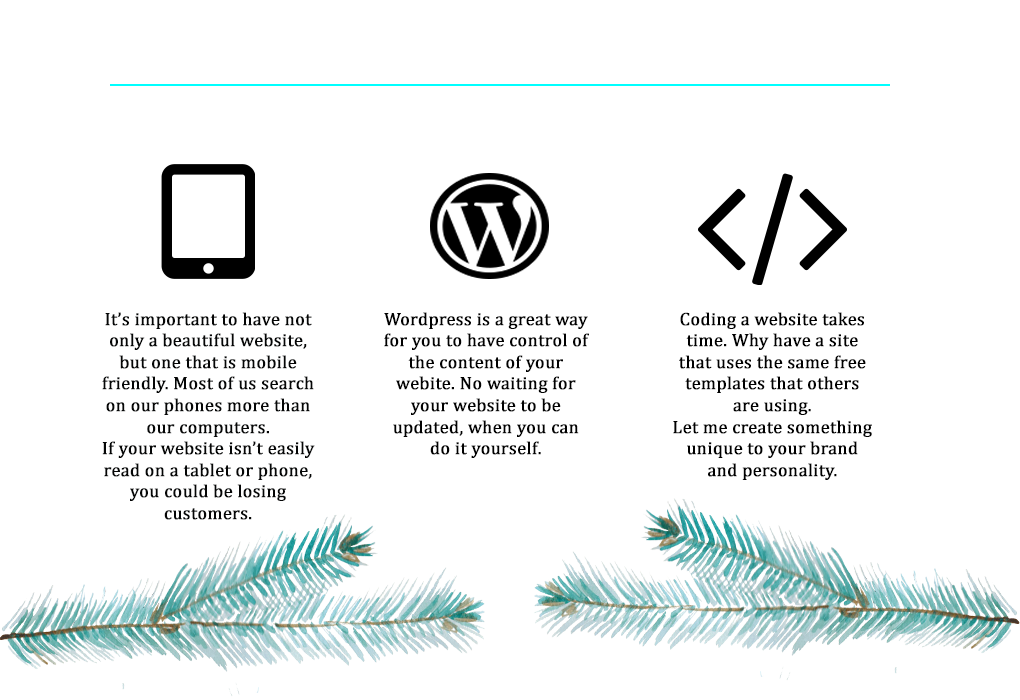
<style>
.page{position:relative;width:1020px;height:700px;background:#ffffff}
.page>*{position:absolute;margin:0}
.t1{font:18px "Cambria";color:#050606;font-weight:bold}
.t2{font:18px "Cambria";color:#010101;font-weight:bold}
.t3{font:18px "Cambria";color:#000000;font-weight:bold}
</style>
<div class="page">
<p class="t1" style="left:102px;top:312px;width:213px;height:208px;text-align:center">It’s important to have not only a beautiful website, but one that is mobile friendly. Most of us search on our phones more than our computers.<br>If your website isn’t easily read on a tablet or phone, you could be losing customers.</p>
<p class="t2" style="left:384px;top:312px;width:205px;height:146px;text-align:center">Wordpress is a great way for you to have control of the content of your webite. No waiting for your website to be updated, when you can do it yourself.</p>
<p class="t3" style="left:673px;top:312px;width:199px;height:168px;text-align:center">Coding a website takes time. Why have a site that uses the same free templates that others are using.<br>Let me create something unique to your brand and personality.</p>
</div>
